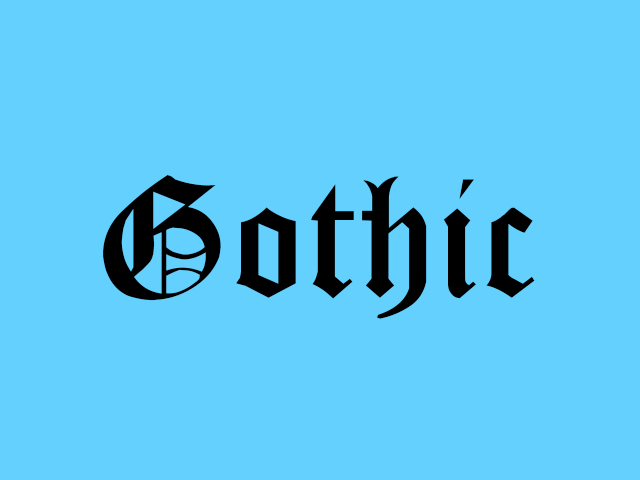
<style>
.page{position:relative;width:640px;height:480px;background:#64d0fd}
.page>*{position:absolute;margin:0}
.t1{font:180px "CloisterBlack-Light";color:#000000}
</style>
<div class="page">
<p class="t1" style="left:103px;top:174px;width:432px;height:145px">Gothic</p>
</div>
